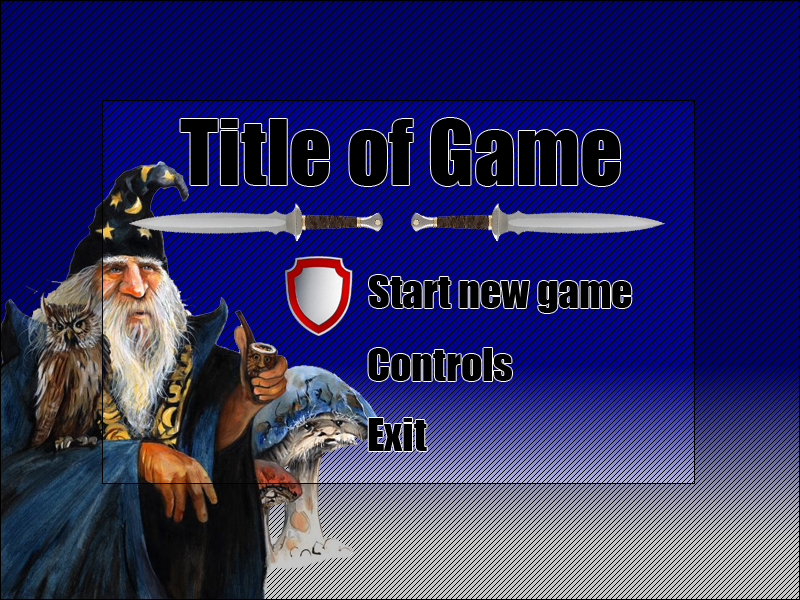
<style>
.page{position:relative;width:800px;height:600px;background:#000272}
.page>*{position:absolute;margin:0}
.t1{font:83.3px "Impact";color:#000000}
.t2{font:41.7px "Impact";color:#000000}
</style>
<div class="page">
<p class="t1" style="left:180px;top:118px;width:440px;height:68px">Title of Game</p>
<p class="t2" style="left:369px;top:275px;width:263px;height:38px">Start new game</p>
<p class="t2" style="left:368px;top:348px;width:144px;height:33px">Controls</p>
<p class="t2" style="left:368px;top:418px;width:59px;height:33px">Exit</p>
</div>
